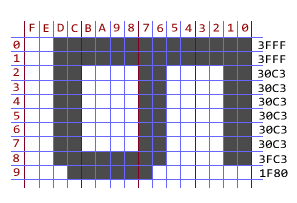
<style>
.page{position:relative;width:297px;height:203px;background:#ffffff}
.page>*{position:absolute;margin:0}
.t1{font:12px "Consolas";color:#7e0202;scale:1.1 1}
.t2{font:12px "Consolas";color:#950000;scale:1.1 1}
.t3{font:12px "Consolas";scale:1.1 1}
.t4{font:12px "Consolas";color:#000000;scale:1.1 1}
</style>
<div class="page">
<p class="t1" style="left:29px;top:23px;width:6px;height:9px">F</p>
<p class="t2" style="left:43px;top:24px;width:6px;height:8px">E</p>
<p class="t3" style="left:57px;top:23px;width:7px;height:9px">D</p>
<p class="t2" style="left:71px;top:24px;width:7px;height:8px">C</p>
<p class="t2" style="left:85px;top:24px;width:6px;height:8px">B</p>
<p class="t2" style="left:98px;top:23px;width:8px;height:9px">A</p>
<p class="t2" style="left:113px;top:23px;width:7px;height:9px">9</p>
<p class="t2" style="left:128px;top:23px;width:6px;height:9px">8</p>
<p class="t1" style="left:143px;top:23px;width:6px;height:9px">7</p>
<p class="t2" style="left:157px;top:24px;width:6px;height:8px">6</p>
<p class="t2" style="left:172px;top:23px;width:6px;height:9px">5</p>
<p class="t3" style="left:185px;top:24px;width:7px;height:8px">4</p>
<p class="t2" style="left:199px;top:24px;width:6px;height:8px">3</p>
<p class="t2" style="left:213px;top:23px;width:6px;height:9px">2</p>
<p class="t2" style="left:228px;top:23px;width:6px;height:9px">1</p>
<p class="t2" style="left:242px;top:23px;width:7px;height:9px">0</p>
<p class="t2" style="left:13px;top:40px;width:7px;height:9px">0</p>
<p class="t4" style="left:258px;top:41px;width:28px;height:8px">3FFF</p>
<p class="t2" style="left:14px;top:54px;width:6px;height:8px">1</p>
<p class="t4" style="left:258px;top:55px;width:28px;height:8px">3FFF</p>
<p class="t2" style="left:13px;top:68px;width:6px;height:8px">2</p>
<p class="t4" style="left:258px;top:69px;width:27px;height:9px">30C3</p>
<p class="t2" style="left:13px;top:83px;width:6px;height:8px">3</p>
<p class="t4" style="left:258px;top:84px;width:28px;height:8px">30C3</p>
<p class="t3" style="left:13px;top:97px;width:7px;height:8px">4</p>
<p class="t4" style="left:259px;top:97px;width:27px;height:9px">30C3</p>
<p class="t2" style="left:14px;top:111px;width:6px;height:9px">5</p>
<p class="t4" style="left:259px;top:111px;width:28px;height:9px">30C3</p>
<p class="t2" style="left:13px;top:125px;width:7px;height:8px">6</p>
<p class="t4" style="left:259px;top:125px;width:28px;height:9px">30C3</p>
<p class="t3" style="left:13px;top:139px;width:6px;height:8px">7</p>
<p class="t4" style="left:259px;top:140px;width:27px;height:8px">30C3</p>
<p class="t3" style="left:13px;top:154px;width:6px;height:8px">8</p>
<p class="t4" style="left:259px;top:155px;width:28px;height:8px">3FC3</p>
<p class="t2" style="left:13px;top:168px;width:7px;height:8px">9</p>
<p class="t4" style="left:260px;top:169px;width:28px;height:8px">1F80</p>
</div>
